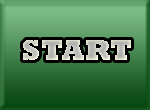
<style>
.page{position:relative;width:150px;height:110px}
.page>*{position:absolute;margin:0}
.t1{font:30px "Rockwell-ExtraBold";color:#c7c2c2}
</style>
<div class="page">
<p class="t1" style="left:23px;top:40px;width:108px;height:20px">START</p>
</div>
